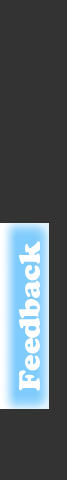
<style>
.page{position:relative;width:67px;height:480px;background:#333333}
.page>*{position:absolute;margin:0}
.t1{font:30px "CooperBlackStd";letter-spacing:-0.01em;color:#ffffff}
</style>
<div class="page">
<p class="t1" style="left:19px;top:241px;width:21px;height:150px;rotate:-90deg">Feedback</p>
</div>
